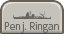
<style>
.page{position:relative;width:64px;height:34px;background:#c5c2b9}
.page>*{position:absolute;margin:0}
.t1{font:10px "UDShinGoPro-Light";color:#6a6560;scale:0.9 1}
</style>
<div class="page">
<p class="t1" style="left:4px;top:22px;width:55px;height:11px">Penj. Ringan</p>
</div>
